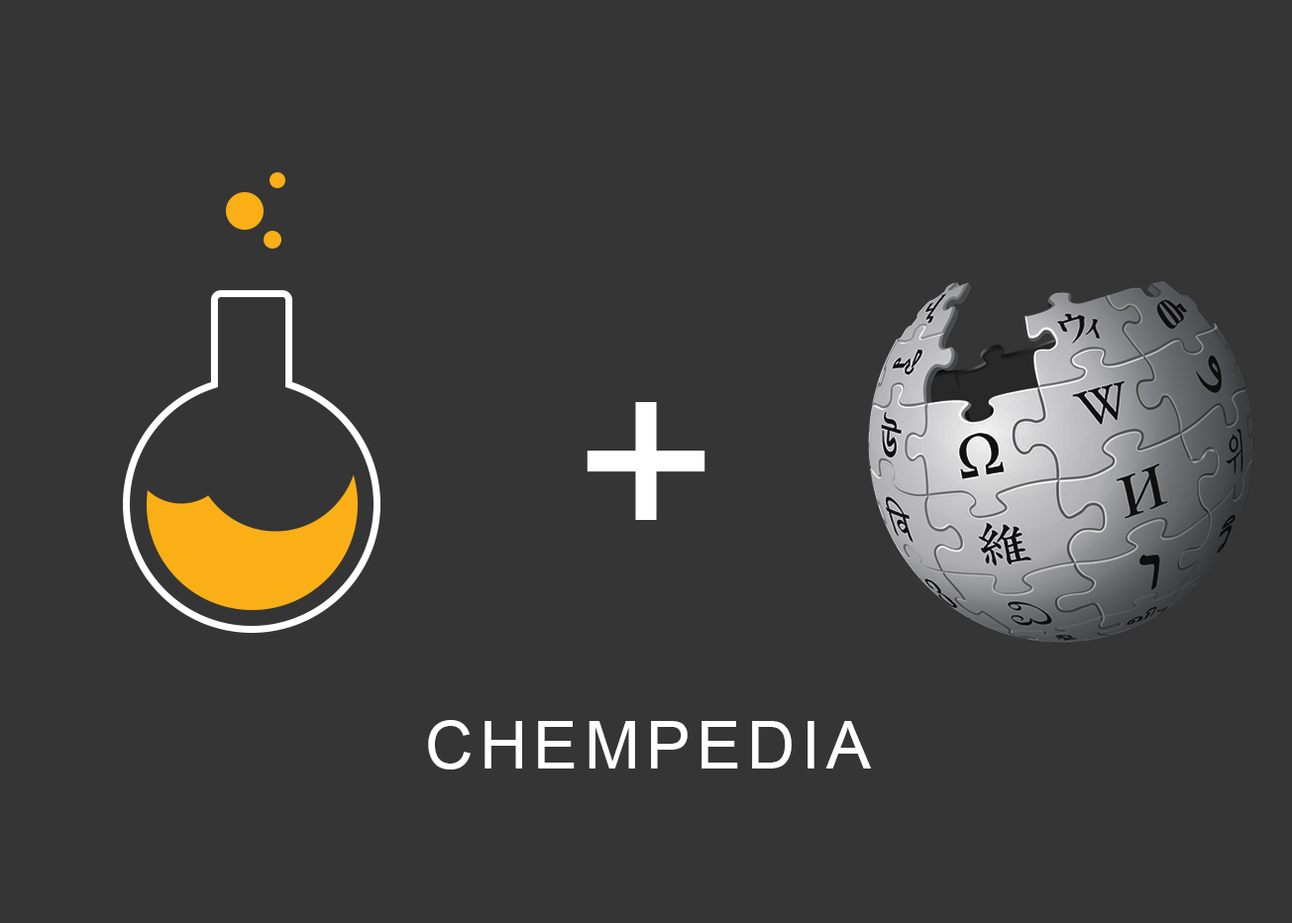
<style>
.page{position:relative;width:1292px;height:923px;background:#353535}
.page>*{position:absolute;margin:0}
.t1{font:247.6px "ArialMT";letter-spacing:0.1em;color:#ffffff;text-transform:uppercase}
.t2{font:66px "ArialMT";letter-spacing:0.1em;color:#ffffff;text-transform:uppercase}
</style>
<div class="page">
<p class="t1" style="left:586px;top:402px;width:119px;height:118px">+</p>
<p class="t2" style="left:428px;top:720px;width:443px;height:50px">Chempedia</p>
</div>
